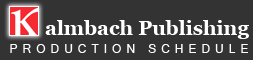
<style>
.page{position:relative;width:253px;height:60px;background:#333333}
.page>*{position:absolute;margin:0}
.t1{font:20px "Georgia-Bold";color:#ffffff}
.t2{font:12px "MicrosoftSansSerif";letter-spacing:0.415em;color:#ffffff}
</style>
<div class="page">
<p class="t1" style="left:45px;top:20px;width:204px;height:19px">almbach Publishing</p>
<p class="t2" style="left:10px;top:44px;width:238px;height:9px">PRODUCTION SCHEDULE</p>
</div>
